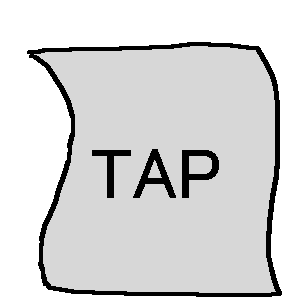
<style>
.page{position:relative;width:300px;height:300px;background:#d7d7d7}
.page>*{position:absolute;margin:0}
.t1{font:72px "MS-UIGothic";color:#000000}
</style>
<div class="page">
<p class="t1" style="left:92px;top:149px;width:127px;height:49px">TAP</p>
</div>
